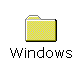
<style>
.page{position:relative;width:80px;height:80px;background:#ffffff}
.page>*{position:absolute;margin:0}
.t1{font:14px "MSReferenceSansSerif";color:#000000}
</style>
<div class="page">
<p class="t1" style="left:10px;top:47px;width:62px;height:11px">Windows</p>
</div>
